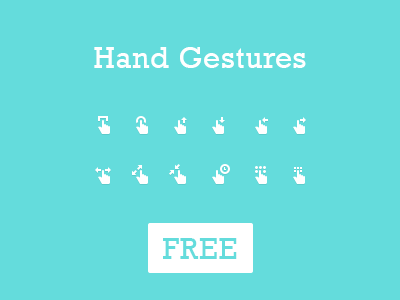
<style>
.page{position:relative;width:400px;height:300px;background:#64dcdc}
.page>*{position:absolute;margin:0}
.t1{font:30px "Rockwell";letter-spacing:0.025em;color:#ffffff}
.t2{font:30px "Rockwell";letter-spacing:0.025em;color:#64dcdc;text-transform:uppercase}
</style>
<div class="page">
<p class="t1" style="left:94px;top:47px;width:212px;height:21px">Hand Gestures</p>
<p class="t2" style="left:163px;top:238px;width:74px;height:21px">Free</p>
</div>
